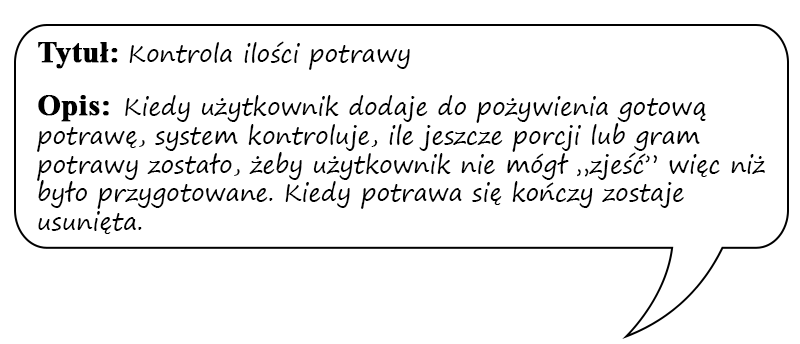
<style>
.page{position:relative;width:800px;height:344px;background:#ffffff}
.page>*{position:absolute;margin:0}
.t1{font:24px "SegoePrint";color:#000000}
.t2{font:30px "TimesNewRomanPS-BoldMT";color:#000000;font-weight:bold}
</style>
<div class="page">
<p class="t1" style="left:37px;top:41px;width:728px;height:193px"><span class="t2">Tytuł: </span>Kontrola ilości potrawy<br><br><span class="t2">Opis:  </span>Kiedy użytkownik dodaje do pożywienia gotową potrawę, system kontroluje, ile jeszcze porcji lub gram potrawy zostało, żeby użytkownik nie mógł „zjeść” więc niż było przygotowane. Kiedy potrawa się kończy zostaje usunięta.</p>
</div>
